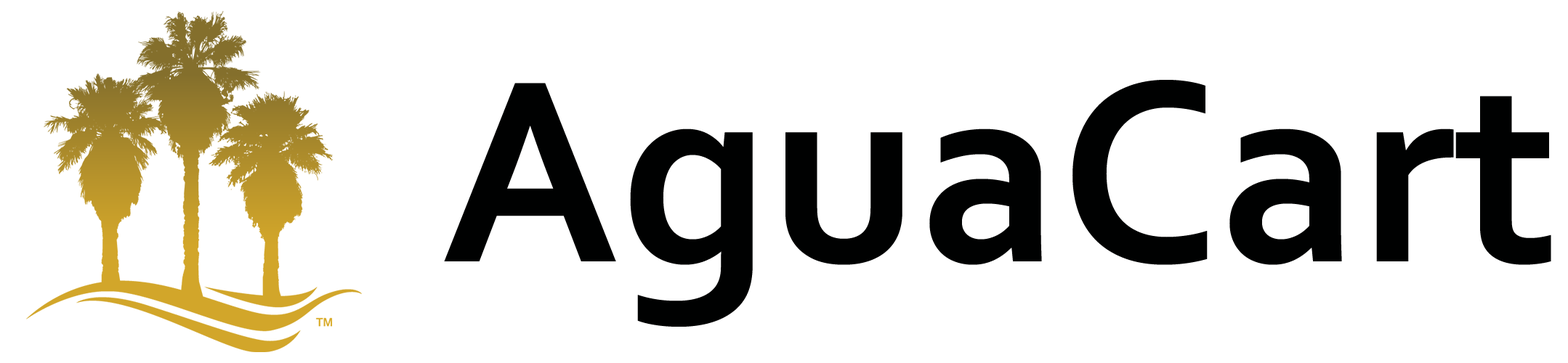
<style>
.page{position:relative;width:1568px;height:363px;background:#ffffff}
.page>*{position:absolute;margin:0}
.t1{font:273.1px "Corbel-Bold";color:#000101}
</style>
<div class="page">
<p class="t1" style="left:444px;top:80px;width:1107px;height:247px">AguaCart</p>
</div>
